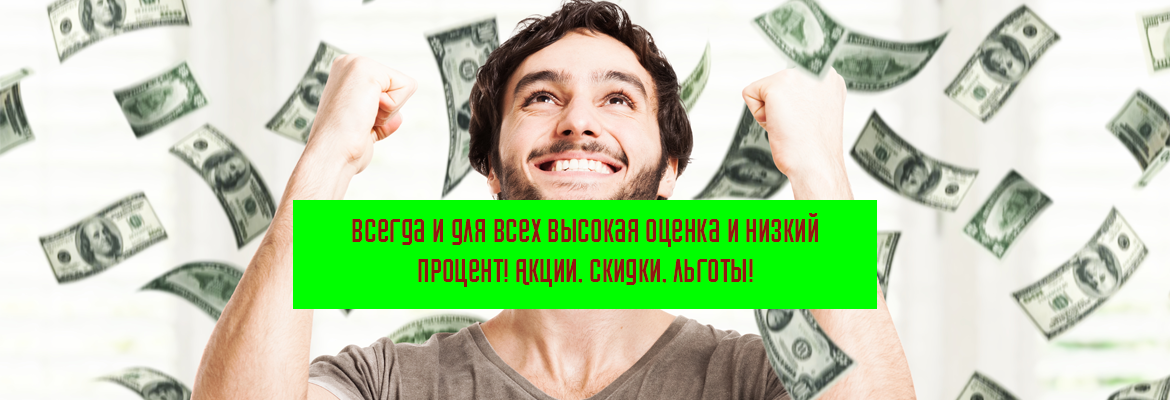
<style>
.page{position:relative;width:1170px;height:400px}
.page>*{position:absolute;margin:0}
.t1{font:33.3px "Airport";color:#941414}
</style>
<div class="page">
<p class="t1" style="left:352px;top:213px;width:466px;height:74px;text-align:center">всегда и для всех высокая оценка и низкий процент! Акции, Скидки, Льготы!</p>
</div>
